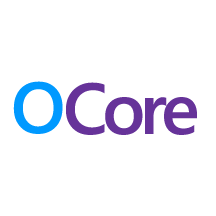
<style>
.page{position:relative;width:216px;height:216px;background:#ffffff}
.page>*{position:absolute;margin:0}
.t1{font:72px "SegoeUI-Semibold";letter-spacing:-0.075em;color:#0099ff}
.t2{font:72px "SegoeUI-Semibold";letter-spacing:-0.075em;color:#663399}
</style>
<div class="page">
<p class="t1" style="left:13px;top:81px;width:50px;height:53px">O</p>
<p class="t2" style="left:66px;top:82px;width:131px;height:53px">Core</p>
</div>
